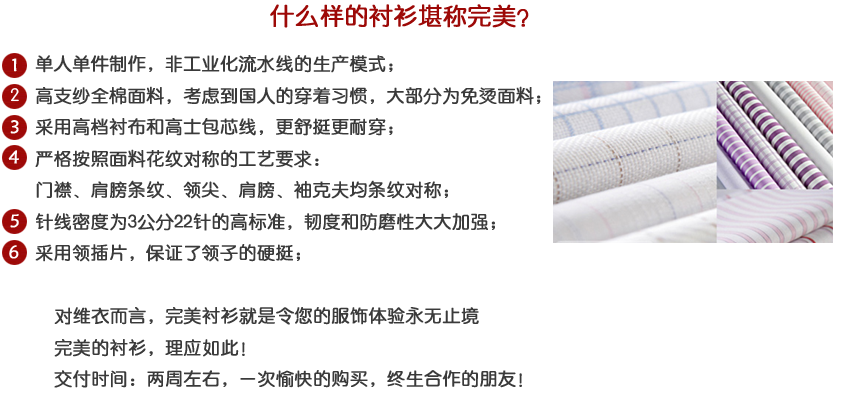
<style>
.page{position:relative;width:844px;height:400px;background:#ffffff}
.page>*{position:absolute;margin:0}
.t1{font:24px "HYe3gj";color:#9d0907;font-weight:bold}
.t2{font:18px "HYe3gj";color:#3a3a3a;font-weight:bold}
</style>
<div class="page">
<p class="t1" style="left:270px;top:4px;width:259px;height:24px">什么样的衬衫堪称完美？</p>
<p class="t2" style="left:35px;top:55px;width:506px;height:333px">单人单件制作，非工业化流水线的生产模式；<br>高支纱全棉面料，考虑到国人的穿着习惯，大部分为免烫面料；<br>采用高档衬布和高士包芯线，更舒挺更耐穿；<br>严格按照面料花纹对称的工艺要求：<br>门襟、肩膀条纹、领尖、肩膀、袖克夫均条纹对称；<br>针线密度为3公分22针的高标准，韧度和防磨性大大加强;<br>采用领插片，保证了领子的硬挺； <br><br>  对维衣而言，完美衬衫就是令您的服饰体验永无止境<br>  完美的衬衫，理应如此！<br>  交付时间：两周左右，一次愉快的购买，终生合作的朋友！</p>
</div>
